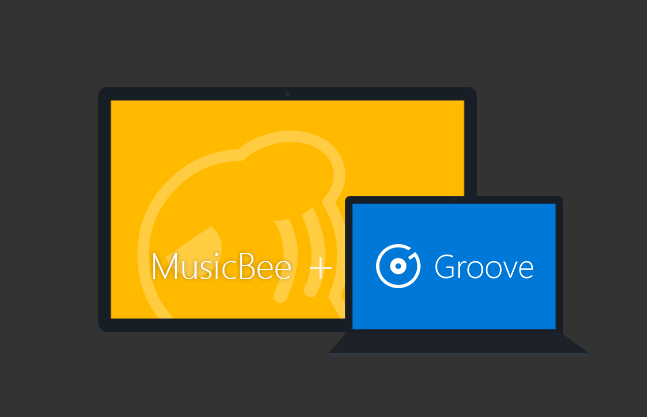
<style>
.page{position:relative;width:647px;height:417px;background:#333333}
.page>*{position:absolute;margin:0}
.t1{font:36px "SegoeUI-Light";color:#ffffff}
.t2{font:48px "SegoeUI-Light";color:#fff4df}
</style>
<div class="page">
<p class="t1" style="left:153px;top:253px;width:138px;height:26px">MusicBee</p>
<p class="t2" style="left:309px;top:257px;width:23px;height:22px">+</p>
</div>
